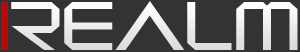
<style>
.page{position:relative;width:300px;height:52px;background:#333333}
.page>*{position:absolute;margin:0}
.t1{font:60px "Dredwerkz";color:#ffffff;text-transform:uppercase}
</style>
<div class="page">
<p class="t1" style="left:11px;top:1px;width:287px;height:49px">Realm</p>
</div>
